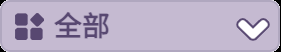
<style>
.page{position:relative;width:281px;height:52px;background:#c5bad1}
.page>*{position:absolute;margin:0}
.t1{font:28px "WebPSD-18463539-0-Regular";color:#584871;font-weight:bold}
</style>
<div class="page">
<p class="t1" style="left:54px;top:8px;width:170px;height:36px">全部</p>
</div>
